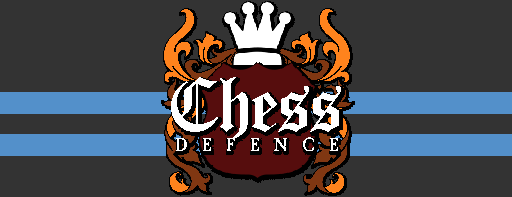
<style>
.page{position:relative;width:512px;height:197px;background:#333333}
.page>*{position:absolute;margin:0}
.t1{font:79.2px "Canterbury-Regular";color:#ffffff}
.t2{font:20.2px "CaslonAntique-Bold";letter-spacing:0.2em;color:#ffffff}
</style>
<div class="page">
<p class="t1" style="left:171px;top:77px;width:170px;height:65px">Chess</p>
<p class="t2" style="left:176px;top:137px;width:162px;height:14px">D E F E N C E</p>
</div>
